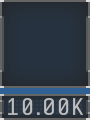
<style>
.page{position:relative;width:90px;height:120px}
.page>*{position:absolute;margin:0}
.t1{font:24px "EveSansNeue-Regular";letter-spacing:0.06em;color:#bfbfbf}
</style>
<div class="page">
<p class="t1" style="left:8px;top:98px;width:75px;height:17px">10.00K</p>
</div>
